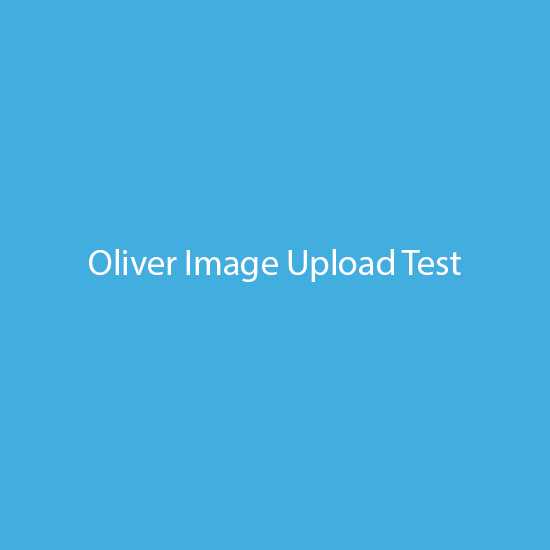
<style>
.page{position:relative;width:550px;height:550px;background:#42aee0}
.page>*{position:absolute;margin:0}
.t1{font:36px "MyriadPro-Regular";color:#ffffff}
</style>
<div class="page">
<p class="t1" style="left:89px;top:249px;width:372px;height:33px">Oliver Image Upload Test</p>
</div>
